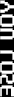
<style>
.page{position:relative;width:14px;height:97px;background:#000000}
.page>*{position:absolute;margin:0}
.t1{font:49.3px "Game-Over";color:#ffffff}
</style>
<div class="page">
<p class="t1" style="left:0px;top:0px;width:14px;height:97px;rotate:90deg">YOU  LOSE</p>
</div>
